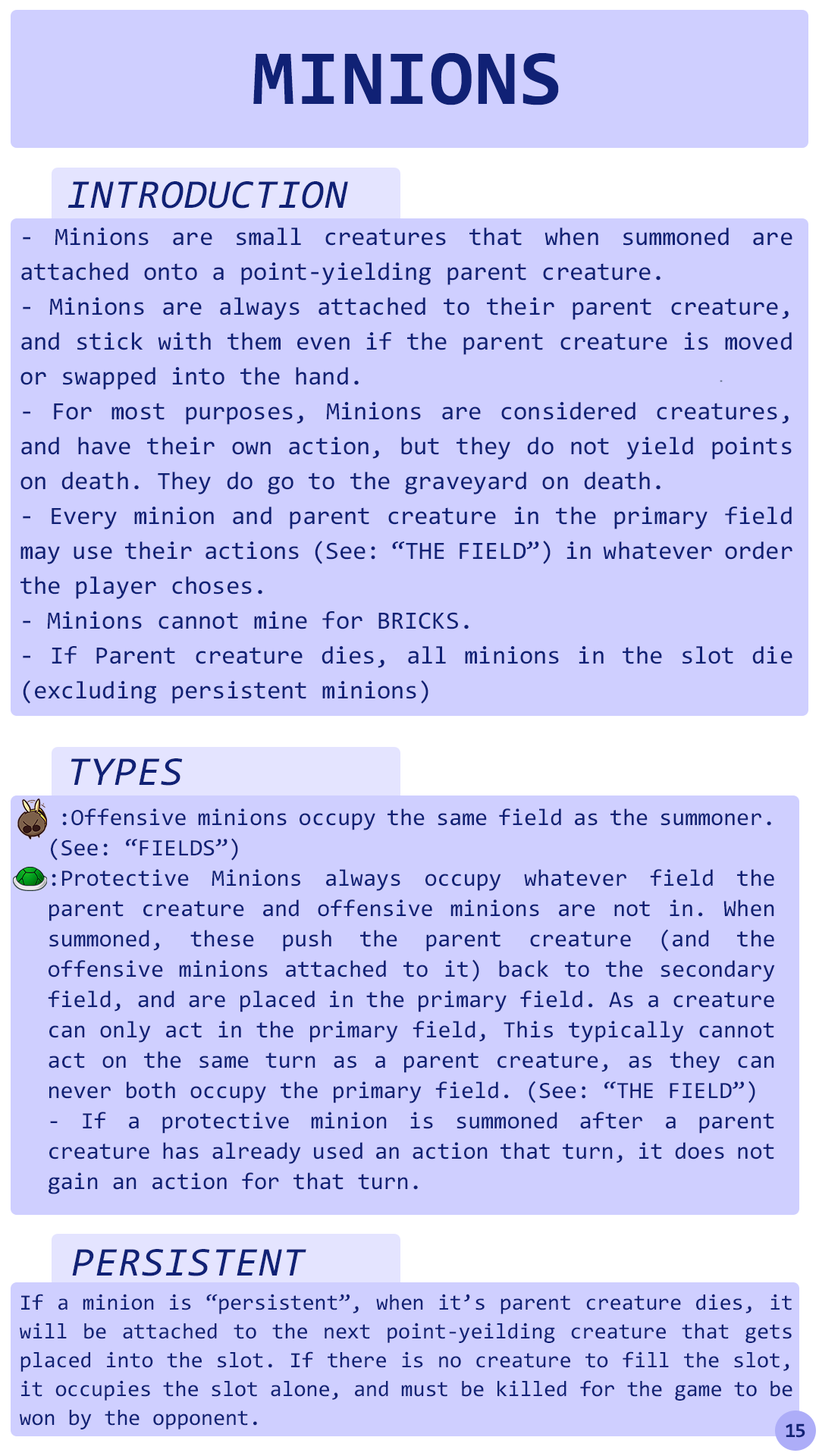
<style>
.page{position:relative;width:819px;height:1456px;background:#cfcfff}
.page>*{position:absolute;margin:0}
.t1{font:78.3px "Consolas-Bold";letter-spacing:0.02em;color:#102175}
.t2{font:41.1px "Consolas-Italic";letter-spacing:0.02em;color:#102175}
.t3{font:25px/34.9px "Consolas";color:#102175}
.t4{font:23.5px/30.3px "Consolas";color:#102175}
.t5{font:22px/28.8px "Consolas";color:#102175}
.t6{font:20.5px "Consolas-Bold";letter-spacing:-0.06em;color:#102175}
</style>
<div class="page">
<p class="t1" style="left:253px;top:53px;width:306px;height:52px">MINIONS</p>
<p class="t2" style="left:67px;top:181px;width:281px;height:28px">INTRODUCTION</p>
<p class="t3" style="left:20px;top:227px;width:772px;height:477px;text-align:justify">- Minions are small creatures that when summoned are attached onto a point-yielding parent creature.<br>- Minions are always attached to their parent creature, and stick with them even if the parent creature is moved or swapped into the hand.<br>- For most purposes, Minions are considered creatures, and have their own action, but they do not yield points on death. They do go to the graveyard on death.<br>- Every minion and parent creature in the primary field may use their actions (See: “THE FIELD”) in whatever order the player choses.<br>- Minions cannot mine for BRICKS.<br>- If Parent creature dies, all minions in the slot die (excluding persistent minions)</p>
<p class="t2" style="left:71px;top:758px;width:112px;height:28px">TYPES</p>
<p class="t4" style="left:48px;top:808px;width:727px;height:386px;text-align:justify">:Offensive minions occupy the same field as the summoner. (See: “FIELDS”)<br>:Protective Minions always occupy whatever field the parent creature and offensive minions are not in. When summoned, these push the parent creature (and the offensive minions attached to it) back to the secondary field, and are placed in the primary field. As a creature can only act in the primary field, This typically cannot act on the same turn as a parent creature, as they can never both occupy the primary field. (See: “THE FIELD”)<br>- If a protective minion is summoned after a parent creature has already used an action that turn, it does not gain an action for that turn.</p>
<p class="t2" style="left:72px;top:1249px;width:234px;height:27px">PERSISTENT</p>
<p class="t5" style="left:20px;top:1294px;width:772px;height:135px;text-align:justify">If a minion is “persistent”, when it’s parent creature dies, it will be attached to the next point-yeilding creature that gets placed into the slot. If there is no creature to fill the slot, it occupies the slot alone, and must be killed for the game to be won by the opponent.</p>
<p class="t6" style="left:786px;top:1423px;width:19px;height:15px">15</p>
</div>
